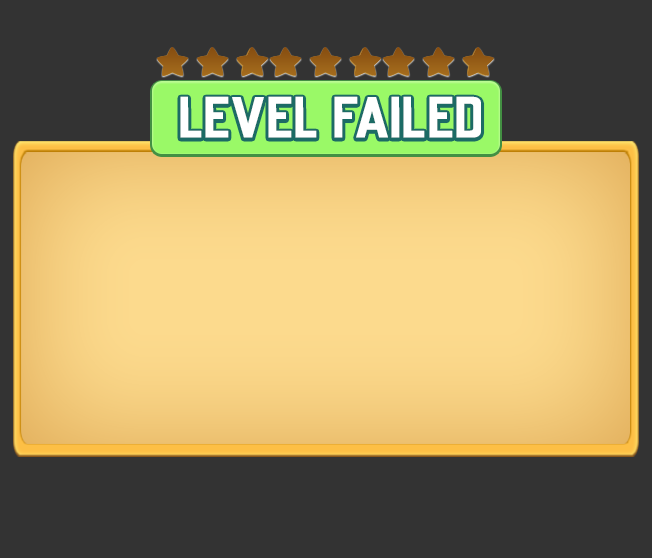
<style>
.page{position:relative;width:652px;height:558px;background:#333333}
.page>*{position:absolute;margin:0}
.t1{font:52.4px "UniversalKnowledge";letter-spacing:-0.02em;color:#ffffff;scale:1.14 1}
</style>
<div class="page">
<p class="t1" style="left:180px;top:96px;width:301px;height:42px">LEVEL FAILED</p>
</div>
